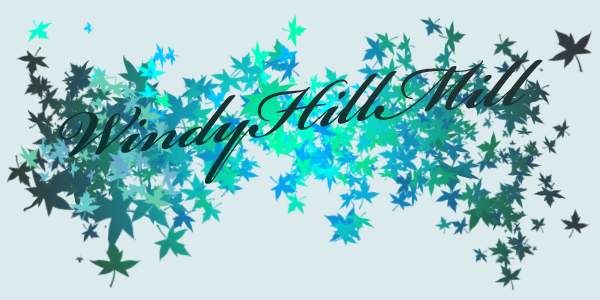
<style>
.page{position:relative;width:600px;height:300px;background:#dbeaed}
.page>*{position:absolute;margin:0}
.t1{font:100px "BickhamScriptPro-Semibold";color:#183333}
</style>
<div class="page">
<p class="t1" style="left:59px;top:59px;width:484px;height:125px">WindyHillMill</p>
</div>
